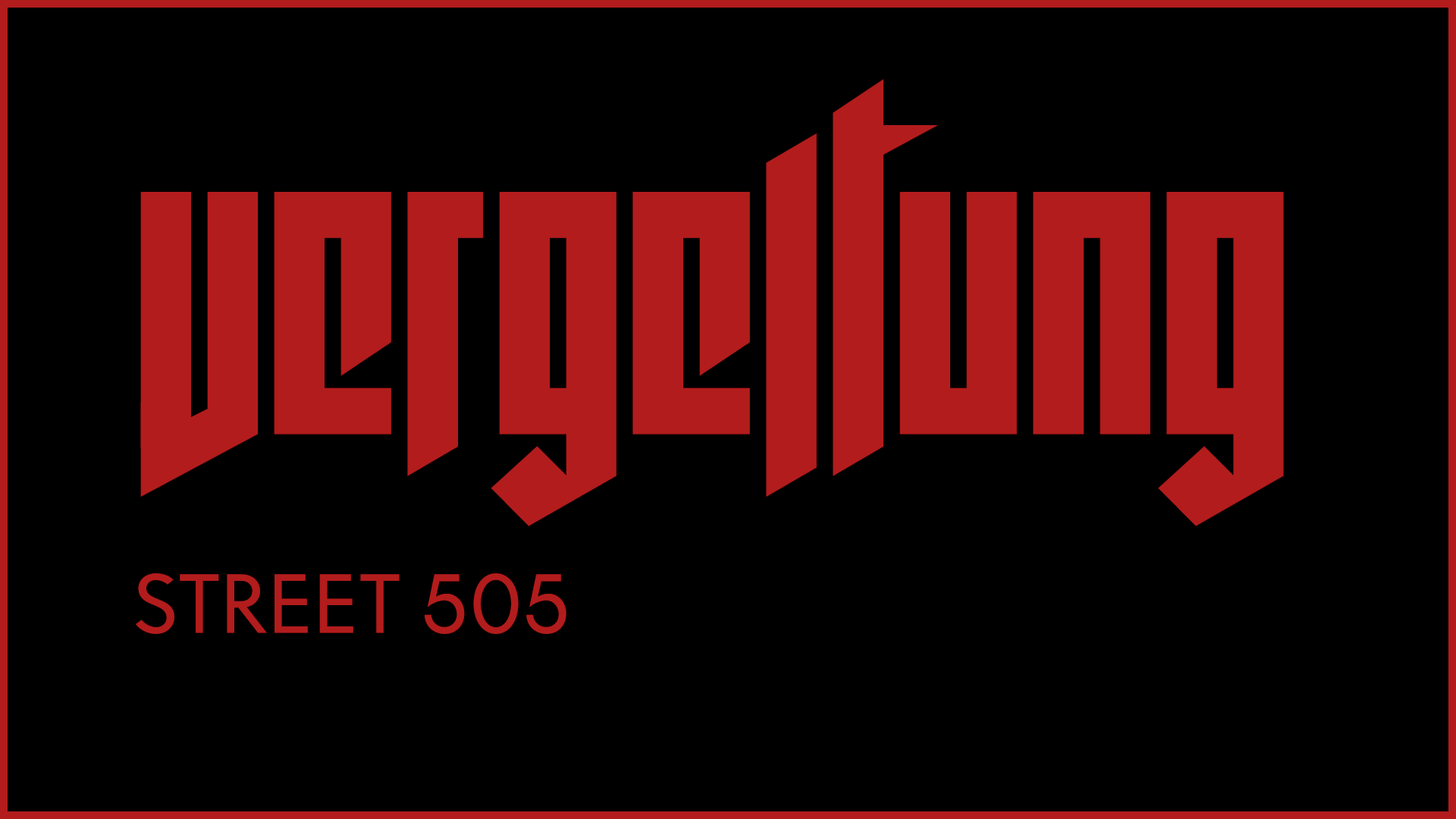
<style>
.page{position:relative;width:1456px;height:819px;background:#000000}
.page>*{position:absolute;margin:0}
.t1{font:417.1px "wolfensteinRUSBYLYAJKA";color:#b21c1c}
.t2{font:83.4px "FONTSPRINGDEMO-CosmataRegular";color:#b21c1c}
</style>
<div class="page">
<p class="t1" style="left:140px;top:79px;width:1144px;height:447px">Vergeltung.</p>
<p class="t2" style="left:136px;top:573px;width:430px;height:61px">STREET 505</p>
</div>
